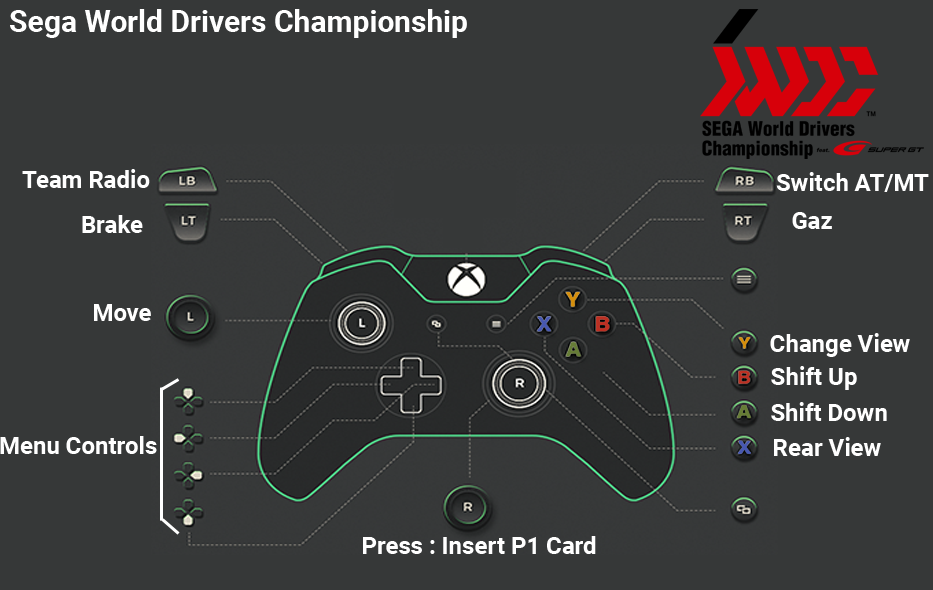
<style>
.page{position:relative;width:933px;height:590px;background:#363838}
.page>*{position:absolute;margin:0}
.t1{font:30px "Roboto-Bold";color:#ffffff}
.t2{font:24px "Roboto-Bold";color:#ffffff}
</style>
<div class="page">
<p class="t1" style="left:10px;top:9px;width:457px;height:29px">Sega World Drivers Championship</p>
<p class="t2" style="left:22px;top:169px;width:128px;height:19px">Team Radio</p>
<p class="t2" style="left:776px;top:172px;width:153px;height:20px">Switch AT/MT</p>
<p class="t2" style="left:82px;top:215px;width:61px;height:18px">Brake</p>
<p class="t2" style="left:792px;top:212px;width:40px;height:17px">Gaz</p>
<p class="t2" style="left:94px;top:304px;width:57px;height:17px">Move</p>
<p class="t2" style="left:770px;top:333px;width:140px;height:24px">Change View</p>
<p class="t2" style="left:771px;top:366px;width:86px;height:24px">Shift Up</p>
<p class="t2" style="left:771px;top:402px;width:116px;height:19px">Shift Down</p>
<p class="t2" style="left:0px;top:436px;width:157px;height:18px">Menu Controls</p>
<p class="t2" style="left:774px;top:437px;width:107px;height:19px">Rear View</p>
<p class="t2" style="left:363px;top:536px;width:233px;height:18px">Press : Insert P1 Card</p>
</div>
